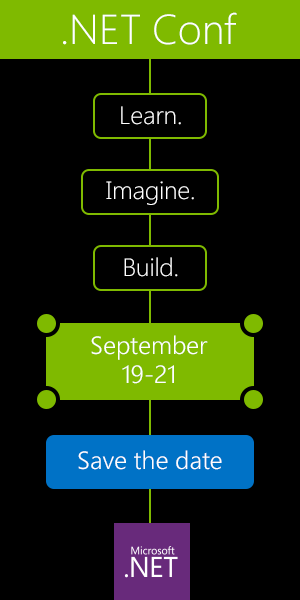
<style>
.page{position:relative;width:300px;height:600px;background:#000000}
.page>*{position:absolute;margin:0}
.t1{font:41.7px "SegoeUI-Light";color:#ffffff}
.t2{font:25px "SegoeUI-Light";color:#ffffff}
.t3{font:25px/29.2px "SegoeUI-Semilight";color:#ffffff}
.t4{font:25px "SegoeUI-Semilight";color:#ffffff}
</style>
<div class="page">
<p class="t1" style="left:63px;top:12px;width:174px;height:33px">.NET Conf</p>
<p class="t2" style="left:121px;top:106px;width:60px;height:19px">Learn.</p>
<p class="t2" style="left:106px;top:181px;width:88px;height:24px">Imagine.</p>
<p class="t2" style="left:124px;top:257px;width:54px;height:20px">Build.</p>
<p class="t3" style="left:91px;top:335px;width:117px;height:49px;text-align:center">September<br>19-21</p>
<p class="t4" style="left:78px;top:450px;width:144px;height:20px">Save the date</p>
</div>
